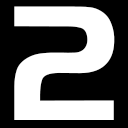
<style>
.page{position:relative;width:128px;height:128px;background:#000000}
.page>*{position:absolute;margin:0}
.t1{font:157.5px "HandelGothic";color:#ffffff}
</style>
<div class="page">
<p class="t1" style="left:14px;top:6px;width:101px;height:114px">2</p>
</div>
